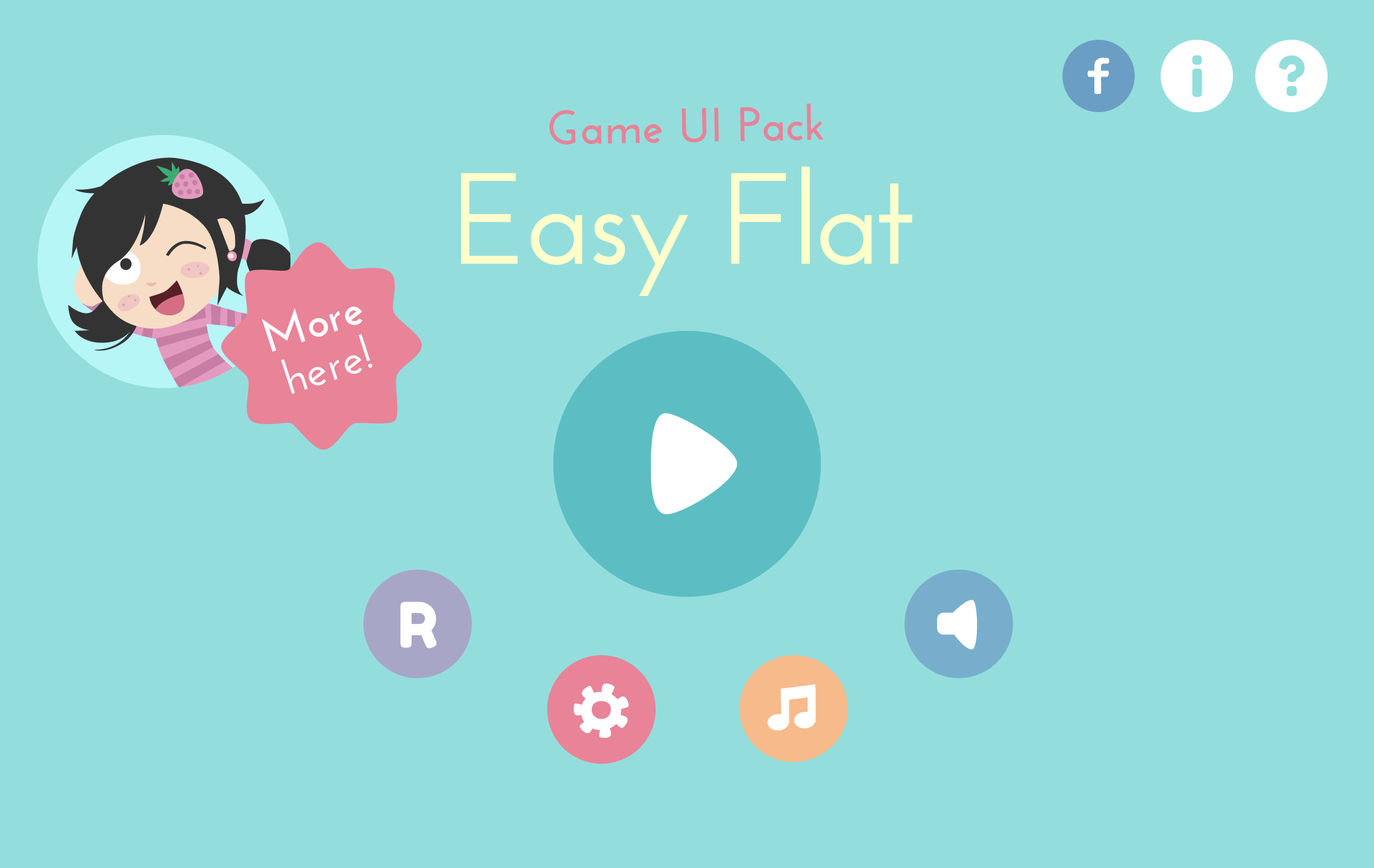
<style>
.page{position:relative;width:1374px;height:868px;background:#93dedd}
.page>*{position:absolute;margin:0}
.t1{font:48.2px "JosefinSans-Bold";color:#e68398}
.t2{font:129.1px "JosefinSans-SemiBold";letter-spacing:-0.03em;color:#ffffcc}
.t3{font:47.1px/46.2px "JosefinSans-SemiBold";color:#ffffff}
.t4{font:47.1px/56.6px "JosefinSans-Bold";color:#ffffff}
</style>
<div class="page">
<p class="t1" style="left:549px;top:104px;width:275px;height:41px;rotate:-1deg">Game UI Pack</p>
<p class="t2" style="left:461px;top:166px;width:451px;height:130px">Easy Flat</p>
<p class="t3" style="left:262px;top:306px;width:110px;height:88px;text-align:center;rotate:-18deg"><span class="t4">More<br></span>here!</p>
</div>
